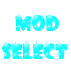
<style>
.page{position:relative;width:71px;height:83px;background:#ffffff}
.page>*{position:absolute;margin:0}
.t1{font:24px "winterflakes";color:#0ffcff}
</style>
<div class="page">
<p class="t1" style="left:2px;top:13px;width:66px;height:46px">MOD<br>SELECT</p>
</div>
